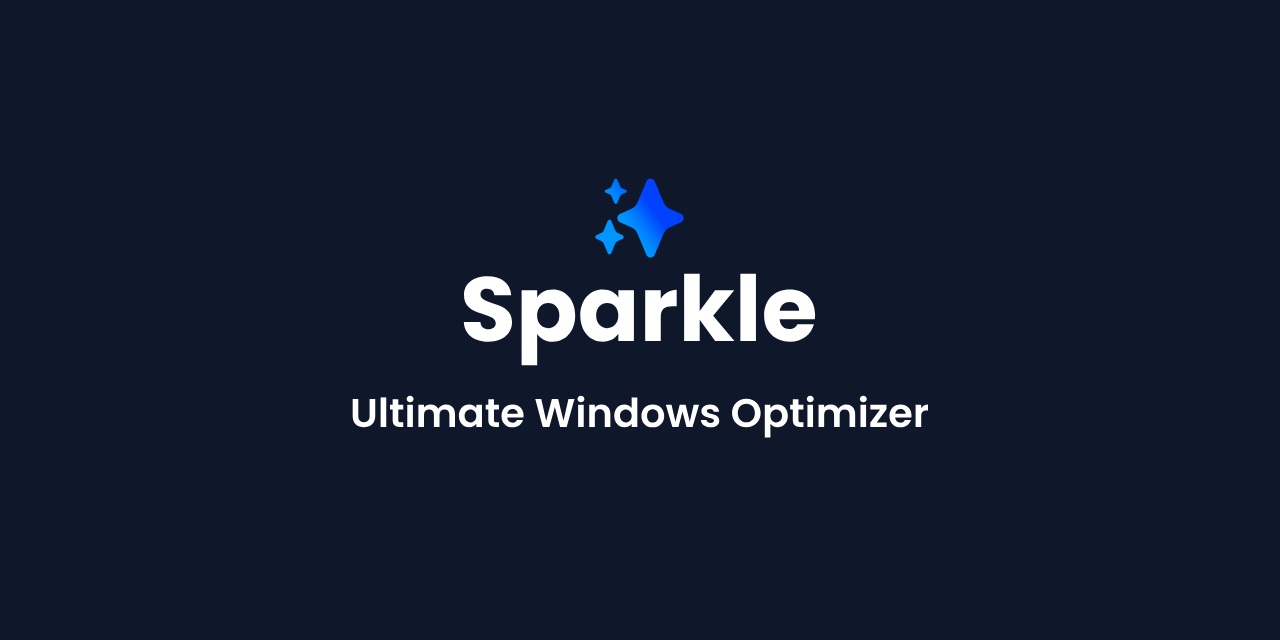
<style>
.page{position:relative;width:1280px;height:640px;background:#0f172a}
.page>*{position:absolute;margin:0}
.t1{font:91px "Poppins-Bold";color:#ffffff}
.t2{font:40px "Poppins-SemiBold";color:#ffffff}
</style>
<div class="page">
<p class="t1" style="left:463px;top:273px;width:353px;height:93px">Sparkle</p>
<p class="t2" style="left:352px;top:395px;width:576px;height:43px">Ultimate Windows Optimizer</p>
</div>
